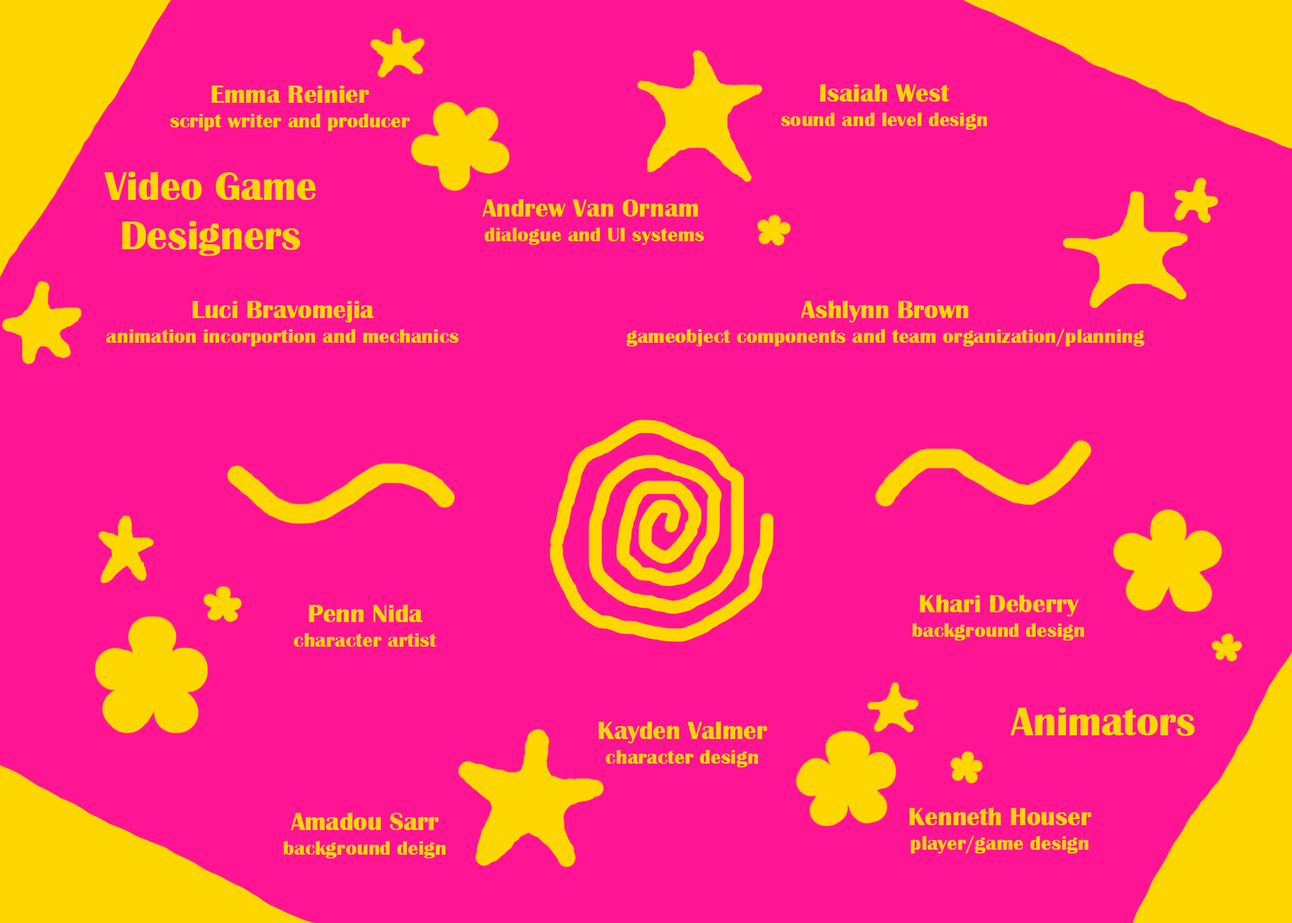
<style>
.page{position:relative;width:1292px;height:923px;background:#ff1494}
.page>*{position:absolute;margin:0}
.t1{font:20.5px "BritannicBold";color:#ffd700}
.t2{font:25.6px "BritannicBold";color:#ffd700}
.t3{font:41px "BritannicBold";color:#ffd700}
</style>
<div class="page">
<p class="t1" style="left:170px;top:86px;width:240px;height:45px;text-align:center"><span class="t2">Emma Reinier<br></span>script writer and producer</p>
<p class="t1" style="left:781px;top:84px;width:206px;height:46px;text-align:center"><span class="t2">Isaiah West<br></span>sound and level design</p>
<p class="t3" style="left:104px;top:172px;width:212px;height:84px;text-align:center">Video Game<br>Designers</p>
<p class="t1" style="left:106px;top:301px;width:353px;height:45px;text-align:center"><span class="t2">Luci Bravomejia<br></span>animation incorportion and mechanics</p>
<p class="t1" style="left:626px;top:300px;width:518px;height:46px;text-align:center"><span class="t2">Ashlynn Brown<br></span>gameobject components and team organization/planning</p>
<p class="t1" style="left:293px;top:604px;width:143px;height:43px;text-align:center"><span class="t2">Penn Nida<br></span>character artist</p>
<p class="t1" style="left:912px;top:594px;width:172px;height:46px;text-align:center"><span class="t2">Khari Deberry<br></span>background design</p>
<p class="t3" style="left:1010px;top:707px;width:185px;height:29px">Animators</p>
<p class="t1" style="left:599px;top:721px;width:168px;height:46px;text-align:center"><span class="t2">Kayden Valmer<br></span>character design</p>
<p class="t1" style="left:909px;top:807px;width:182px;height:46px;text-align:center"><span class="t2">Kenneth Houser<br></span>player/game design</p>
<p class="t1" style="left:284px;top:812px;width:161px;height:46px;text-align:center"><span class="t2">Amadou Sarr<br></span>background deign</p>
</div>
